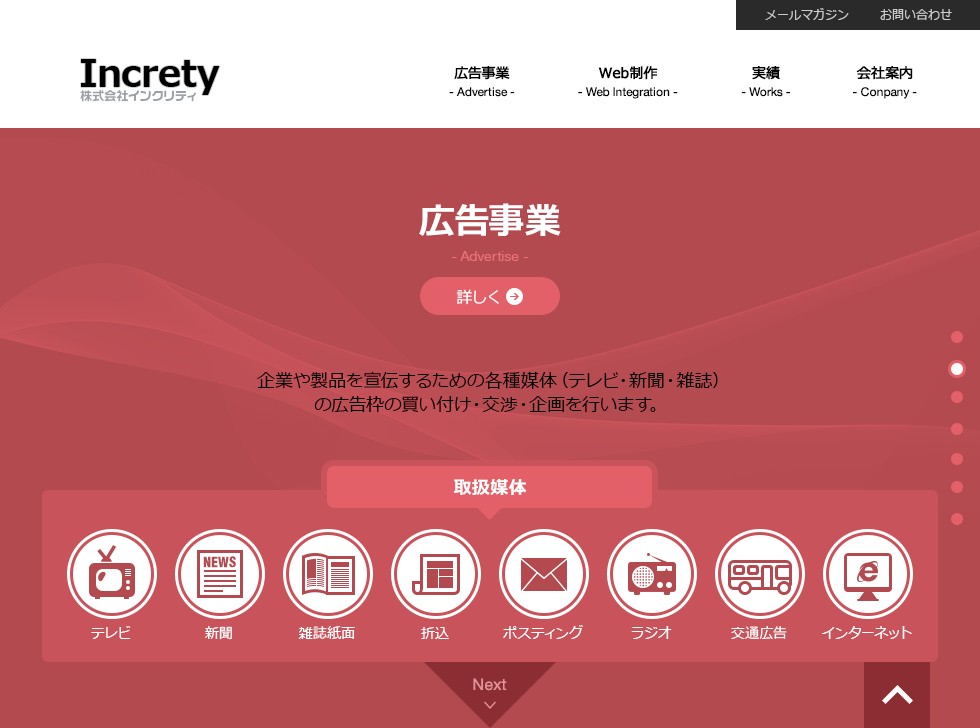
<style>
.page{position:relative;width:980px;height:728px;background:#b24a50}
.page>*{position:absolute;margin:0}
.t1{font:12px "Meiryo";color:#cccccc}
.t2{font:36.6px "Meiryo-Bold";color:#000000}
.t3{font:14px "Meiryo";color:#000000;font-weight:bold}
.t4{font:12px "HelveticaNeue";color:#000000}
.t5{font:12px "VD-LogoMaru-Extra-G";color:#9da1a6}
.t6{font:36px "Meiryo-Bold";color:#ffffff}
.t7{font:14px "HelveticaNeue";color:#eb7077}
.t8{font:16px "Meiryo";color:#ffffff}
.t9{font:18px/24px "Meiryo";color:#000000}
.t10{font:18px "Meiryo-Bold";color:#ffffff}
.t11{font:15.8px "Helvetica-Condensed-Black-Se";color:#b24a50}
.t12{font:14px "Meiryo";color:#ffffff}
.t13{font:16px "HelveticaNeue";color:#e49499}
</style>
<div class="page">
<p class="t1" style="left:765px;top:8px;width:84px;height:12px">メールマガジン</p>
<p class="t1" style="left:880px;top:9px;width:72px;height:11px">お問い合わせ</p>
<p class="t2" style="left:81px;top:59px;width:139px;height:36px">Increty</p>
<p class="t3" style="left:454px;top:66px;width:56px;height:14px">広告事業</p>
<p class="t3" style="left:598px;top:66px;width:60px;height:14px">Web制作</p>
<p class="t3" style="left:752px;top:66px;width:28px;height:14px">実績</p>
<p class="t3" style="left:856px;top:66px;width:57px;height:14px">会社案内</p>
<p class="t4" style="left:449px;top:87px;width:66px;height:10px">- Advertise -</p>
<p class="t4" style="left:578px;top:87px;width:100px;height:12px">- Web Integration -</p>
<p class="t4" style="left:741px;top:87px;width:49px;height:10px">- Works -</p>
<p class="t4" style="left:853px;top:87px;width:64px;height:12px">- Conpany -</p>
<p class="t5" style="left:80px;top:90px;width:116px;height:12px">株式会社インクリティ</p>
<p class="t6" style="left:419px;top:203px;width:142px;height:33px">広告事業</p>
<p class="t7" style="left:452px;top:251px;width:77px;height:10px">- Advertise -</p>
<p class="t8" style="left:456px;top:289px;width:43px;height:16px">詳しく</p>
<p class="t9" style="left:257px;top:371px;width:461px;height:41px;text-align:center">企業や製品を宣伝するための各種媒体（テレビ・新聞・雑誌）の広告枠の買い付け・交渉・企画を行います。</p>
<p class="t10" style="left:453px;top:479px;width:74px;height:16px">取扱媒体</p>
<p class="t11" style="left:203px;top:556px;width:33px;height:12px">NEWS</p>
<p class="t12" style="left:91px;top:626px;width:40px;height:13px">テレビ</p>
<p class="t12" style="left:205px;top:626px;width:27px;height:14px">新聞</p>
<p class="t12" style="left:298px;top:626px;width:57px;height:13px">雑誌紙面</p>
<p class="t12" style="left:421px;top:627px;width:28px;height:12px">折込</p>
<p class="t12" style="left:503px;top:625px;width:80px;height:14px">ポスティング</p>
<p class="t12" style="left:631px;top:626px;width:41px;height:13px">ラジオ</p>
<p class="t12" style="left:731px;top:626px;width:56px;height:13px">交通広告</p>
<p class="t12" style="left:822px;top:626px;width:90px;height:13px">インターネット</p>
<p class="t13" style="left:473px;top:678px;width:34px;height:13px">Next</p>
</div>
